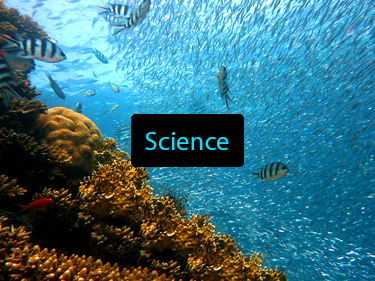
<style>
.page{position:relative;width:375px;height:281px}
.page>*{position:absolute;margin:0}
.t1{font:26.7px "MyriadPro-Regular";color:#00e5ff}
</style>
<div class="page">
<p class="t1" style="left:145px;top:132px;width:84px;height:18px">Science</p>
</div>
